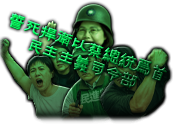
<style>
.page{position:relative;width:174px;height:140px;background:#ffffff}
.page>*{position:absolute;margin:0}
.t1{font:18.1px/16.8px "FZZJ-MSHLFW";letter-spacing:-0.075em}
</style>
<div class="page">
<p class="t1" style="left:10px;top:13px;width:157px;height:75px;text-align:center;rotate:20deg">誓死捍卫以蔡总统为首<br>民主主义司令部</p>
</div>
